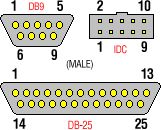
<style>
.page{position:relative;width:161px;height:130px;background:#ffffff}
.page>*{position:absolute;margin:0}
.t1{font:14px "HelveticaCE-CondBold";letter-spacing:-0.05em;color:#000000}
.t2{font:10px "HelveticaCE-Cond";letter-spacing:-0.05em}
.t3{font:10px "HelveticaCE-Cond";letter-spacing:-0.05em;color:#000000}
.t4{font:11px "HelveticaCE-Cond";letter-spacing:-0.05em;color:#ff0000}
</style>
<div class="page">
<p class="t1" style="left:11px;top:0px;width:5px;height:11px">1</p>
<p class="t2" style="left:29px;top:2px;width:15px;height:9px">DB9</p>
<p class="t1" style="left:57px;top:0px;width:6px;height:11px">5</p>
<p class="t1" style="left:97px;top:0px;width:6px;height:11px">2</p>
<p class="t1" style="left:138px;top:0px;width:13px;height:11px">10</p>
<p class="t1" style="left:97px;top:41px;width:5px;height:11px">1</p>
<p class="t1" style="left:141px;top:41px;width:6px;height:11px">9</p>
<p class="t1" style="left:17px;top:49px;width:6px;height:11px">6</p>
<p class="t1" style="left:51px;top:49px;width:6px;height:11px">9</p>
<p class="t2" style="left:114px;top:45px;width:13px;height:9px">IDC</p>
<p class="t3" style="left:66px;top:60px;width:27px;height:10px">(MALE)</p>
<p class="t1" style="left:12px;top:68px;width:5px;height:11px">1</p>
<p class="t1" style="left:141px;top:68px;width:13px;height:11px">13</p>
<p class="t1" style="left:13px;top:118px;width:13px;height:11px">14</p>
<p class="t4" style="left:68px;top:120px;width:24px;height:10px">DB-25</p>
<p class="t1" style="left:135px;top:118px;width:13px;height:11px">25</p>
</div>
